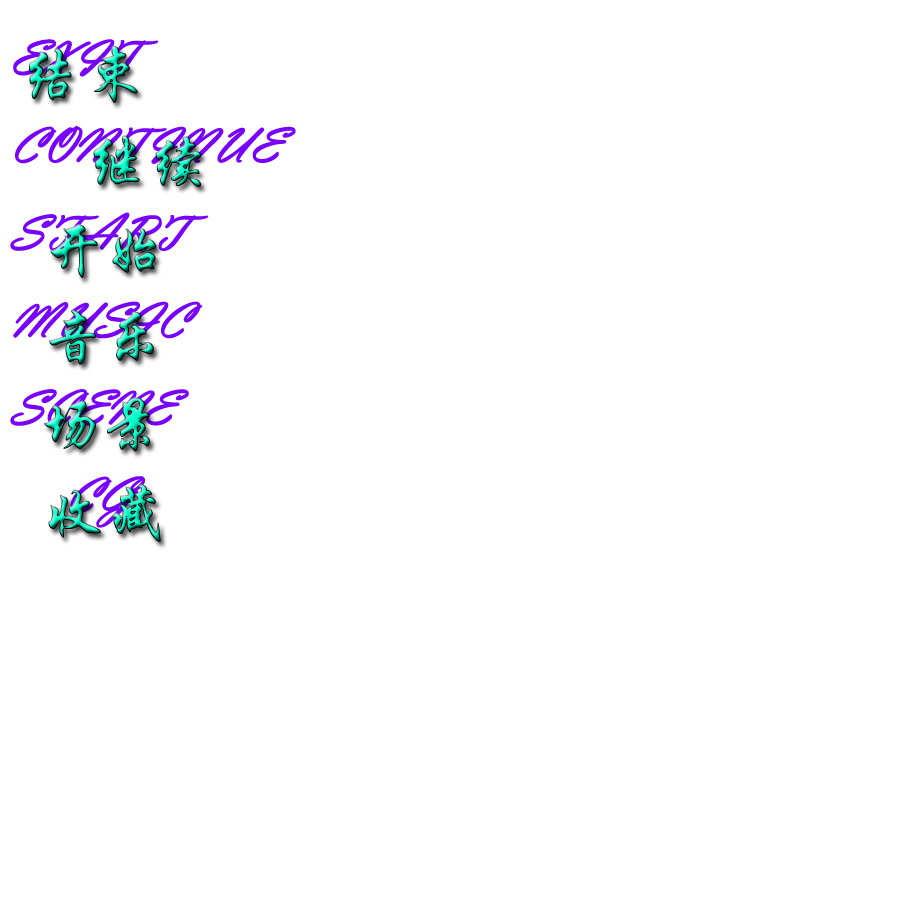
<style>
.page{position:relative;width:900px;height:900px;background:#ffffff}
.page>*{position:absolute;margin:0}
.t1{font:50px "VladimirScript";color:#7800ff;font-weight:bold}
.t2{font:60px "STXingkai";font-weight:bold}
</style>
<div class="page">
<p class="t1" style="left:10px;top:39px;width:286px;height:489px">EXIT<br>CONTINUE<br>START<br>MUSIC<br>SCENE<br>    CG</p>
<p class="t2" style="left:29px;top:45px;width:109px;height:58px">结束</p>
<p class="t2" style="left:93px;top:135px;width:108px;height:52px">继续</p>
<p class="t2" style="left:50px;top:224px;width:107px;height:54px">开始</p>
<p class="t2" style="left:49px;top:310px;width:105px;height:55px">音乐</p>
<p class="t2" style="left:44px;top:397px;width:106px;height:55px">场景</p>
<p class="t2" style="left:48px;top:484px;width:113px;height:58px">收藏</p>
</div>
